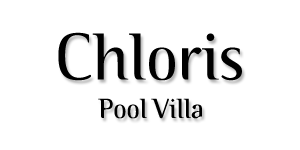
<style>
.page{position:relative;width:300px;height:150px;background:#ffffff}
.page>*{position:absolute;margin:0}
.t1{font:65.9px "BinaryITC-Light";color:#000000}
.t2{font:27.5px "BinaryITC-Light";color:#000000}
</style>
<div class="page">
<p class="t1" style="left:58px;top:32px;width:184px;height:49px">Chloris</p>
<p class="t2" style="left:98px;top:98px;width:104px;height:21px">Pool Villa</p>
</div>
